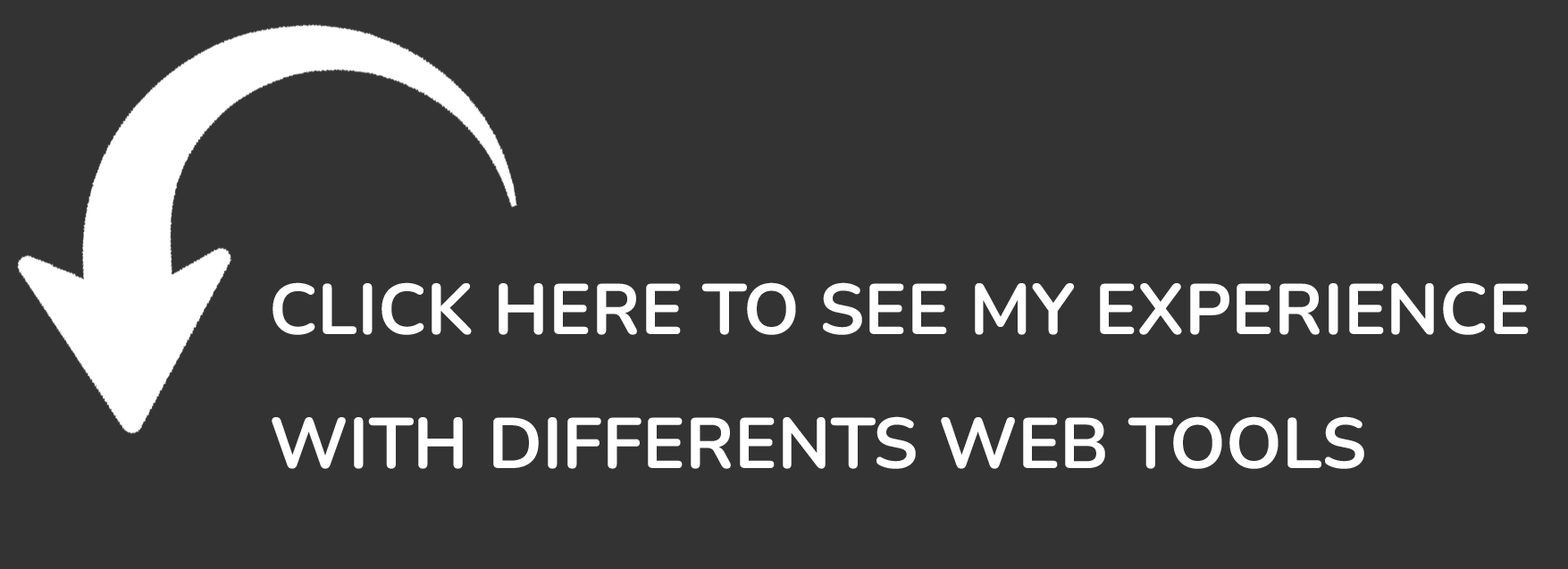
<style>
.page{position:relative;width:1568px;height:569px;background:#333333}
.page>*{position:absolute;margin:0}
.t1{font:71.5px/133.9px "Nunito-Bold";color:#ffffff}
</style>
<div class="page">
<p class="t1" style="left:272px;top:282px;width:1257px;height:187px">CLICK HERE TO SEE MY EXPERIENCE WITH DIFFERENTS WEB TOOLS</p>
</div>
